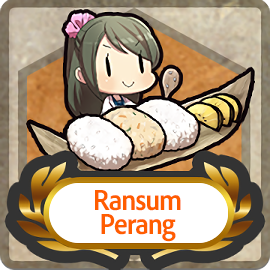
<style>
.page{position:relative;width:270px;height:270px}
.page>*{position:absolute;margin:0}
.t1{font:30px/24px "AdobeClean-Bold";letter-spacing:-0.04em;color:#ff5d00;scale:0.9 1}
</style>
<div class="page">
<p class="t1" style="left:95px;top:190px;width:86px;height:52px;text-align:center">Ransum<br>Perang</p>
</div>
